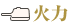
<style>
.page{position:relative;width:69px;height:27px;background:#ffffff}
.page>*{position:absolute;margin:0}
.t1{font:18px "RyuminPro-Heavy";color:#ae9442}
</style>
<div class="page">
<p class="t1" style="left:33px;top:5px;width:35px;height:17px">火力</p>
</div>
